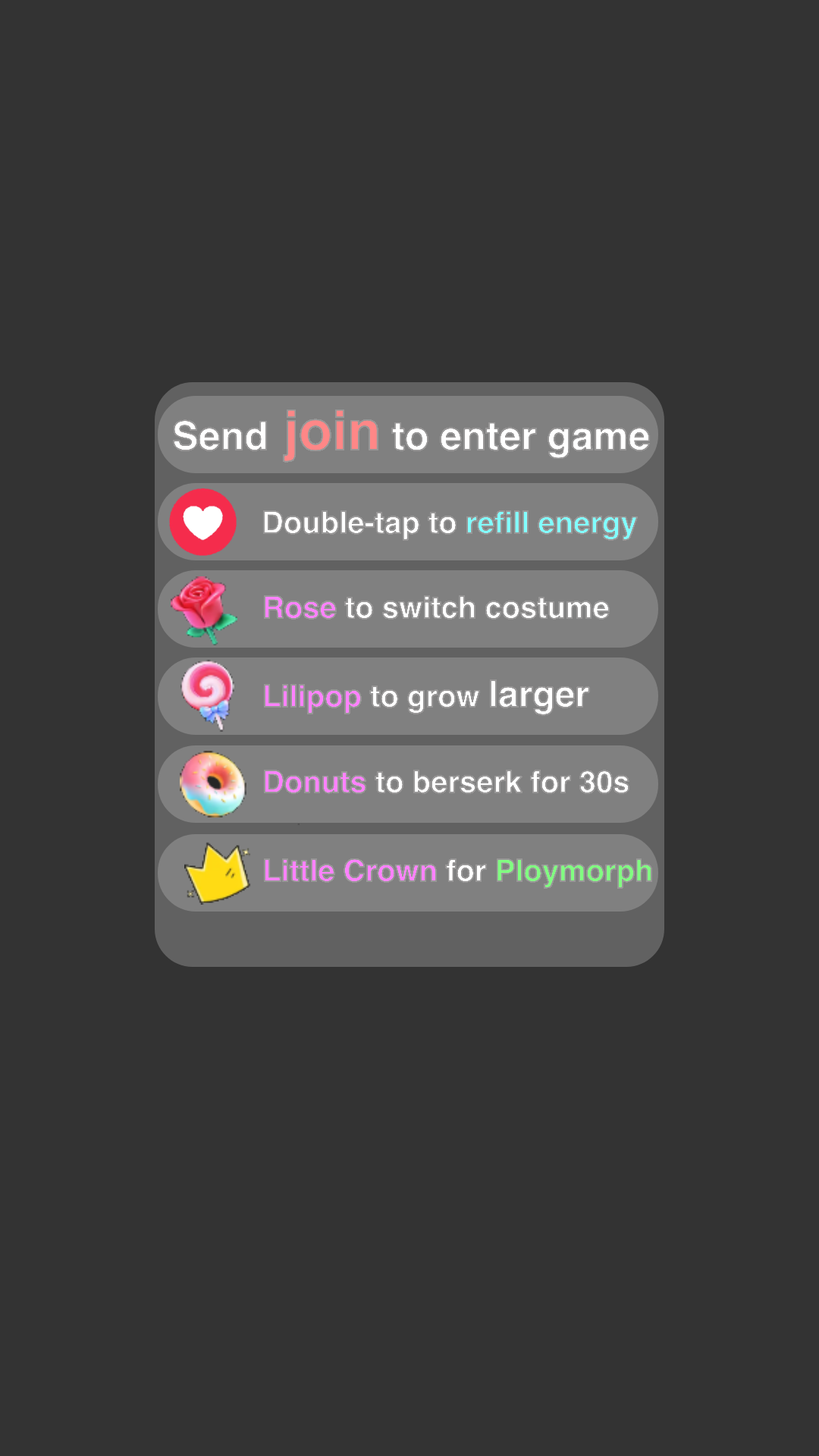
<style>
.page{position:relative;width:819px;height:1456px;background:#333333}
.page>*{position:absolute;margin:0}
.t1{font:39.4px "Helvetica-Bold"}
.t2{font:54.6px "Helvetica-Bold"}
.t3{font:30.3px "Helvetica-Bold"}
.t4{font:36.4px "Helvetica-Bold"}
</style>
<div class="page">
<p class="t1" style="left:173px;top:409px;width:478px;height:54px">Send <span class="t2">join</span> to enter game</p>
<p class="t3" style="left:263px;top:510px;width:375px;height:31px">Double-tap to refill energy</p>
<p class="t3" style="left:264px;top:595px;width:346px;height:25px">Rose to switch costume</p>
<p class="t3" style="left:264px;top:679px;width:326px;height:37px">Lilipop to grow <span class="t4">larger</span></p>
<p class="t3" style="left:264px;top:769px;width:366px;height:25px">Donuts to berserk for 30s</p>
<p class="t3" style="left:264px;top:858px;width:388px;height:31px">Little Crown for Ploymorph</p>
</div>
